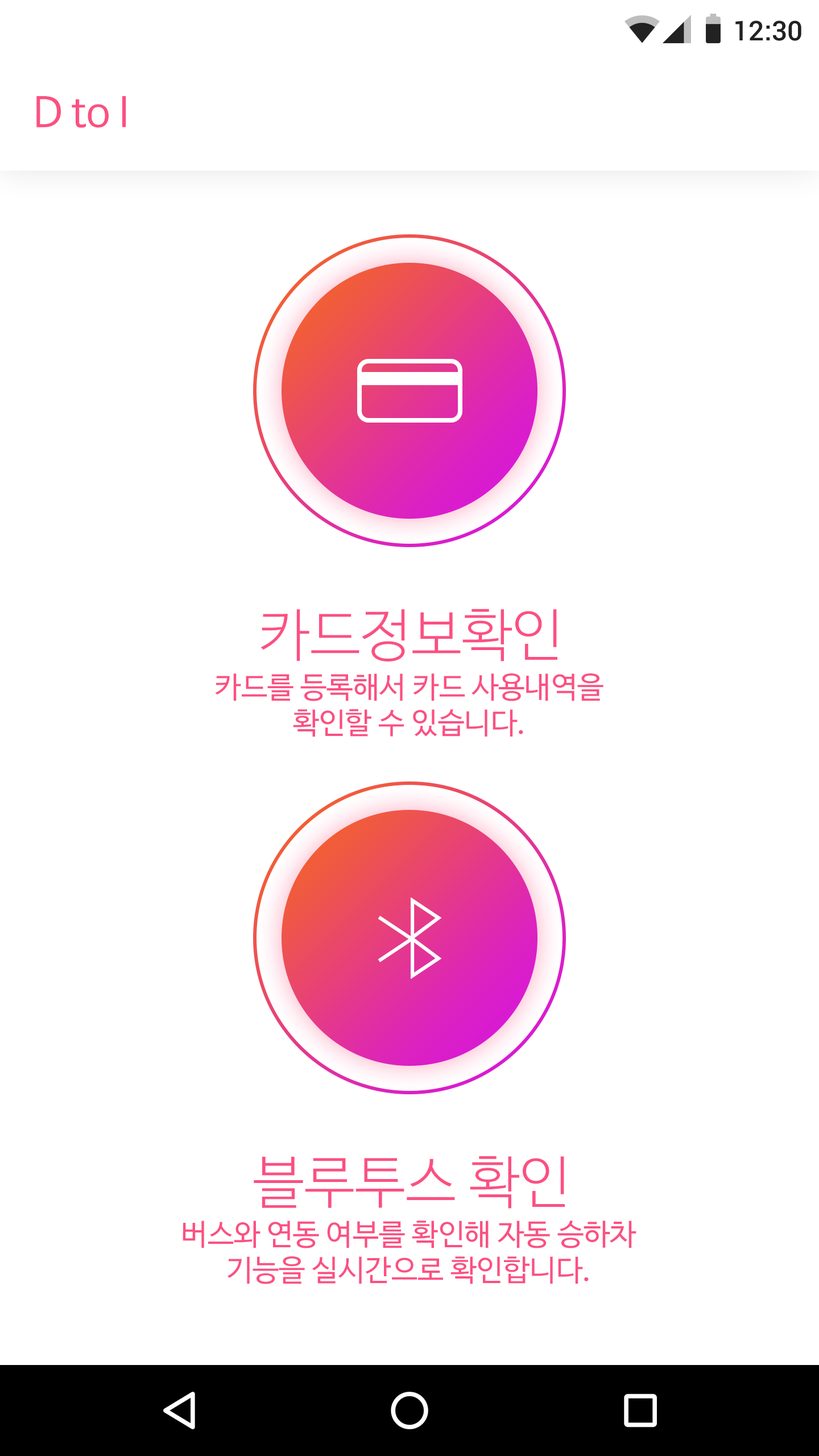
<style>
.page{position:relative;width:819px;height:1456px;background:#ffffff}
.page>*{position:absolute;margin:0}
.t1{font:27.3px "Roboto-Medium";color:#222222}
.t2{font:40.9px "NanumBarunGothic";color:#fb5082}
.t3{font:56.9px "NanumBarunGothicLight";color:#fb5082}
.t4{font:29.6px "NanumBarunGothic";color:#fb5082}
</style>
<div class="page">
<p class="t1" style="left:735px;top:20px;width:66px;height:21px">12:30</p>
<p class="t2" style="left:36px;top:96px;width:90px;height:32px">D to I</p>
<p class="t3" style="left:260px;top:609px;width:297px;height:52px">카드정보확인</p>
<p class="t4" style="left:215px;top:673px;width:388px;height:64px;text-align:center">카드를 등록해서 카드 사용내역을<br>확인할 수 있습니다.</p>
<p class="t3" style="left:254px;top:1156px;width:311px;height:53px">블루투스 확인</p>
<p class="t4" style="left:183px;top:1221px;width:453px;height:63px;text-align:center">버스와 연동 여부를 확인해 자동 승하차<br>기능을 실시간으로 확인합니다.</p>
</div>
